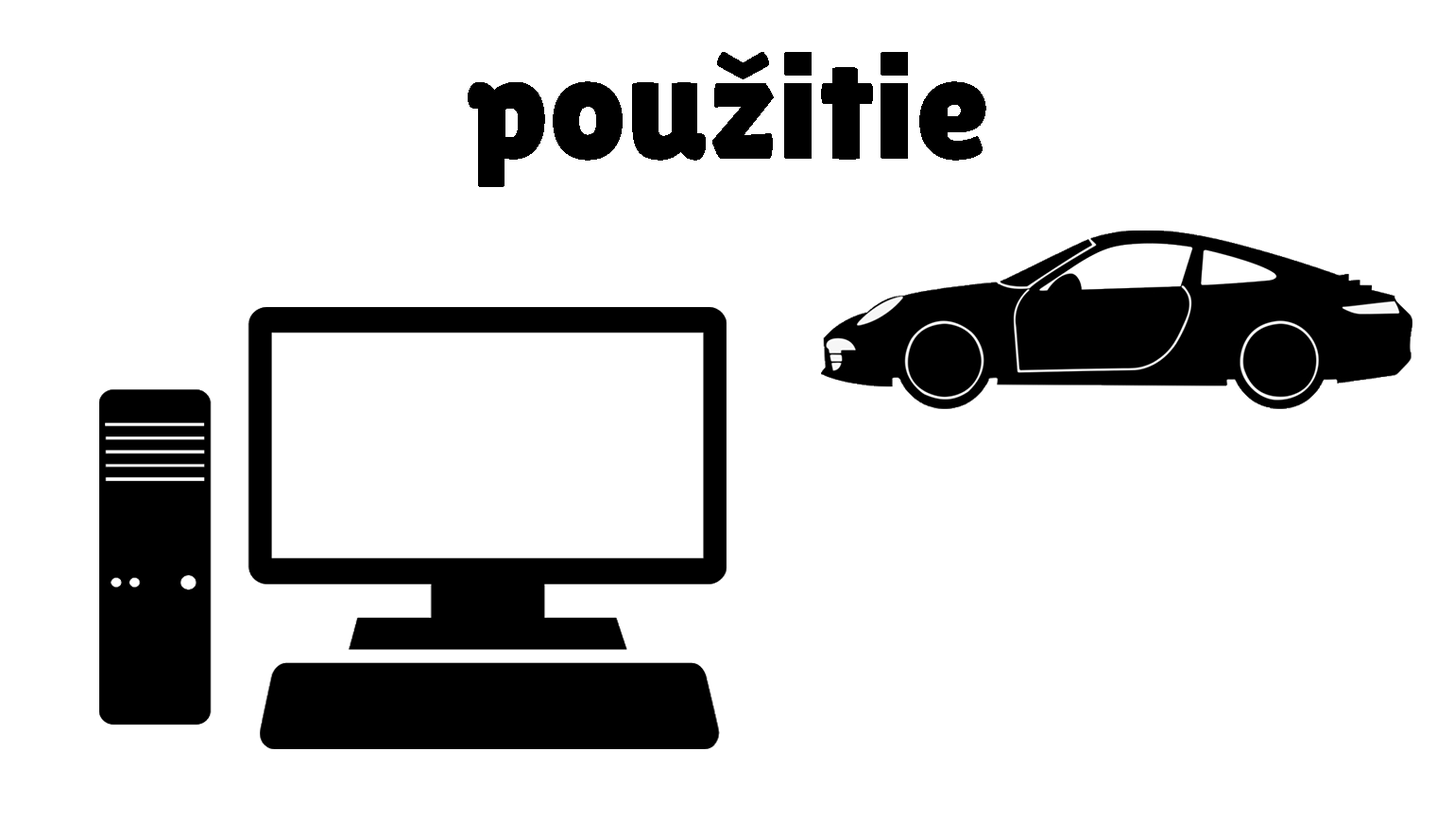
<style>
.page{position:relative;width:1454px;height:820px;background:#ffffff}
.page>*{position:absolute;margin:0}
.t1{font:151.2px "LilitaOneRus";color:#000000}
</style>
<div class="page">
<p class="t1" style="left:468px;top:52px;width:518px;height:135px">použitie</p>
</div>
